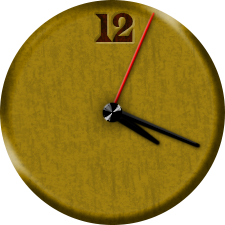
<style>
.page{position:relative;width:225px;height:225px;background:#ffffff}
.page>*{position:absolute;margin:0}
.t1{font:41.8px "LatinWide";color:#361201;scale:0.44 1}
</style>
<div class="page">
<p class="t1" style="left:95px;top:13px;width:38px;height:29px">12</p>
</div>
